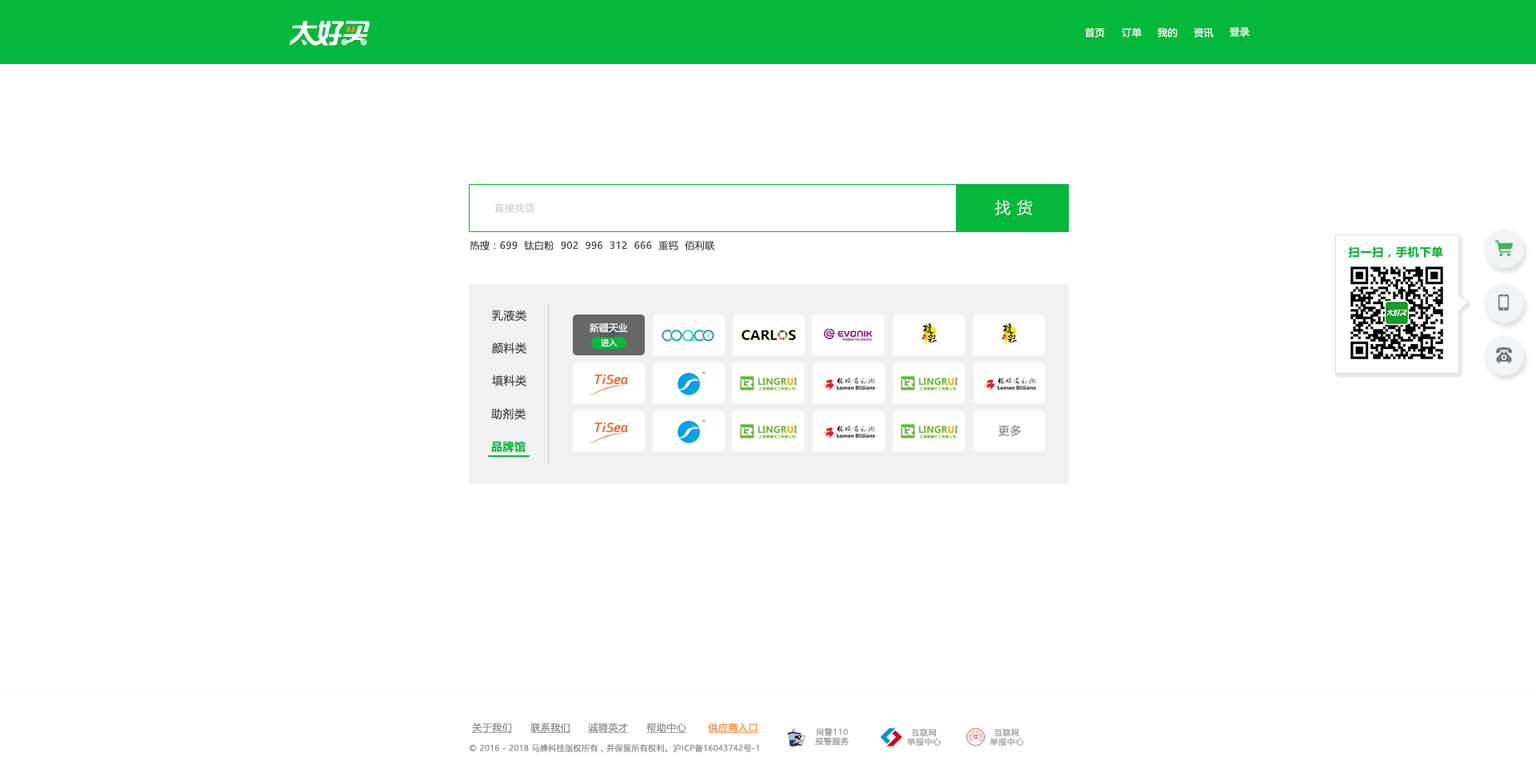
<style>
.page{position:relative;width:1536px;height:777px;background:#ffffff}
.page>*{position:absolute;margin:0}
.t1{font:9.6px "MicrosoftYaHeiUI";letter-spacing:0.04em;color:#ffffff}
.t2{font:9.6px "MicrosoftYaHeiUI";letter-spacing:0.04em;color:#d2d2d2}
.t3{font:16px "MicrosoftYaHeiUILight";letter-spacing:0.04em;color:#ffffff}
.t4{font:9.6px "MicrosoftYaHeiUI";letter-spacing:0.04em;color:#444444}
.t5{font:11.2px "MicrosoftYaHeiUI-Bold";letter-spacing:0.06em;color:#04b83b}
.t6{font:11.2px "MicrosoftYaHeiUI";letter-spacing:0.04em;color:#444444}
.t7{font:9.6px "MicrosoftYaHei";color:#f7f7f7}
.t8{font:8px "MicrosoftYaHei";color:#f7f7f7}
.t9{font:11.2px "MicrosoftYaHeiUI";letter-spacing:0.04em;color:#424242}
.t10{font:11.2px "MicrosoftYaHeiUI";letter-spacing:0.04em;color:#8c8c8c}
.t11{font:11.2px "MicrosoftYaHeiUI-Bold";letter-spacing:0.04em;color:#04b83b}
.t12{font:9.6px "MicrosoftYaHeiUI";letter-spacing:0.04em;color:#8c8c8c;text-decoration:underline}
.t13{font:9.6px "MicrosoftYaHeiUI";letter-spacing:0.04em;color:#ff8b25;text-decoration:underline}
.t14{font:8px/9.3px "MicrosoftYaHei";letter-spacing:0.06em;color:#999999}
.t15{font:8px "MicrosoftYaHeiUI";letter-spacing:0.04em;color:#8c8c8c}
</style>
<div class="page">
<p class="t1" style="left:1084px;top:27px;width:20px;height:11px">首页</p>
<p class="t1" style="left:1121px;top:27px;width:20px;height:11px">订单</p>
<p class="t1" style="left:1157px;top:27px;width:20px;height:11px">我的</p>
<p class="t1" style="left:1193px;top:27px;width:20px;height:11px">资讯</p>
<p class="t1" style="left:1229px;top:27px;width:20px;height:10px">登录</p>
<p class="t2" style="left:494px;top:202px;width:40px;height:11px">直接找货</p>
<p class="t3" style="left:994px;top:199px;width:38px;height:16px">找 货</p>
<p class="t4" style="left:469px;top:240px;width:245px;height:10px">热搜：699  钛白粉  902  996  312  666  重钙  佰利联</p>
<p class="t5" style="left:1348px;top:246px;width:95px;height:12px">扫一扫，手机下单</p>
<p class="t6" style="left:492px;top:310px;width:34px;height:12px">乳液类</p>
<p class="t7" style="left:589px;top:322px;width:39px;height:11px">新疆天业</p>
<p class="t8" style="left:601px;top:338px;width:16px;height:9px">进入</p>
<p class="t9" style="left:492px;top:342px;width:34px;height:11px">颜料类</p>
<p class="t9" style="left:492px;top:374px;width:34px;height:12px">填料类</p>
<p class="t9" style="left:491px;top:408px;width:34px;height:12px">助剂类</p>
<p class="t10" style="left:998px;top:425px;width:22px;height:11px">更多</p>
<p class="t11" style="left:491px;top:441px;width:34px;height:11px">品牌馆</p>
<p class="t12" style="left:472px;top:722px;width:41px;height:11px">关于我们</p>
<p class="t12" style="left:530px;top:722px;width:41px;height:11px">联系我们</p>
<p class="t12" style="left:588px;top:722px;width:41px;height:11px">诚聘英才</p>
<p class="t12" style="left:646px;top:722px;width:41px;height:11px">帮助中心</p>
<p class="t13" style="left:708px;top:722px;width:50px;height:11px">供应商入口</p>
<p class="t14" style="left:815px;top:727px;width:34px;height:18px;text-align:center">网警110<br>报警服务</p>
<p class="t14" style="left:907px;top:728px;width:34px;height:17px;text-align:center">互联网<br>举报中心</p>
<p class="t14" style="left:989px;top:728px;width:35px;height:17px;text-align:center">互联网<br>举报中心</p>
<p class="t15" style="left:469px;top:743px;width:290px;height:9px">© 2016 - 2018 马蜂科技版权所有，并保留所有权利。沪ICP备16043742号-1</p>
</div>
